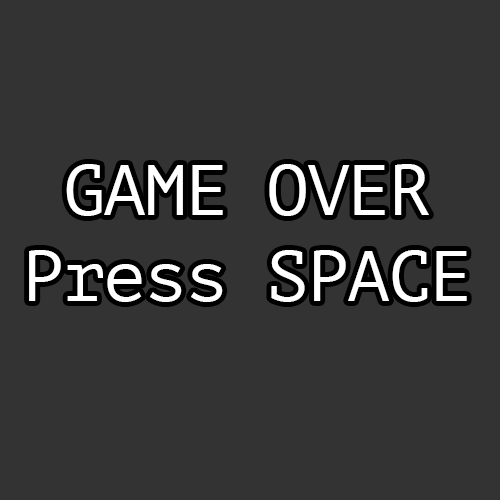
<style>
.page{position:relative;width:500px;height:500px;background:#333333}
.page>*{position:absolute;margin:0}
.t1{font:72px "PTMono-Regular";letter-spacing:-0.035em;color:#ffffff}
</style>
<div class="page">
<p class="t1" style="left:29px;top:164px;width:438px;height:138px;text-align:center">GAME OVER<br>Press SPACE</p>
</div>
